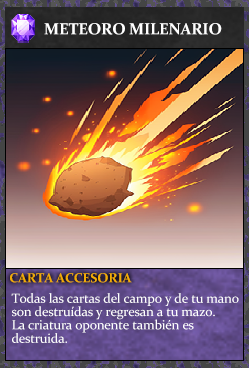
<style>
.page{position:relative;width:249px;height:368px}
.page>*{position:absolute;margin:0}
.t1{font:16px "Constantia-Bold";letter-spacing:-0.02em;color:#ffffff}
.t2{font:13.3px "Constantia-Bold";letter-spacing:-0.02em;color:#f2ac05}
.t3{font:13.3px/13.3px "Constantia";letter-spacing:-0.02em;color:#ffffff}
</style>
<div class="page">
<p class="t1" style="left:44px;top:23px;width:178px;height:12px">METEORO MILENARIO</p>
<p class="t2" style="left:10px;top:273px;width:122px;height:10px">CARTA ACCESORIA</p>
<p class="t3" style="left:11px;top:293px;width:228px;height:50px">Todas las cartas del campo y de tu mano<br>son destruídas y regresan a tu mazo.<br>La criatura oponente también es<br>destruida.</p>
</div>
